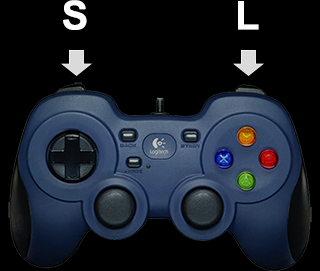
<style>
.page{position:relative;width:320px;height:271px;background:#000000}
.page>*{position:absolute;margin:0}
.t1{font:40px "Arial-BoldMT";color:#fefefe}
</style>
<div class="page">
<p class="t1" style="left:63px;top:0px;width:196px;height:30px">S              L</p>
</div>
